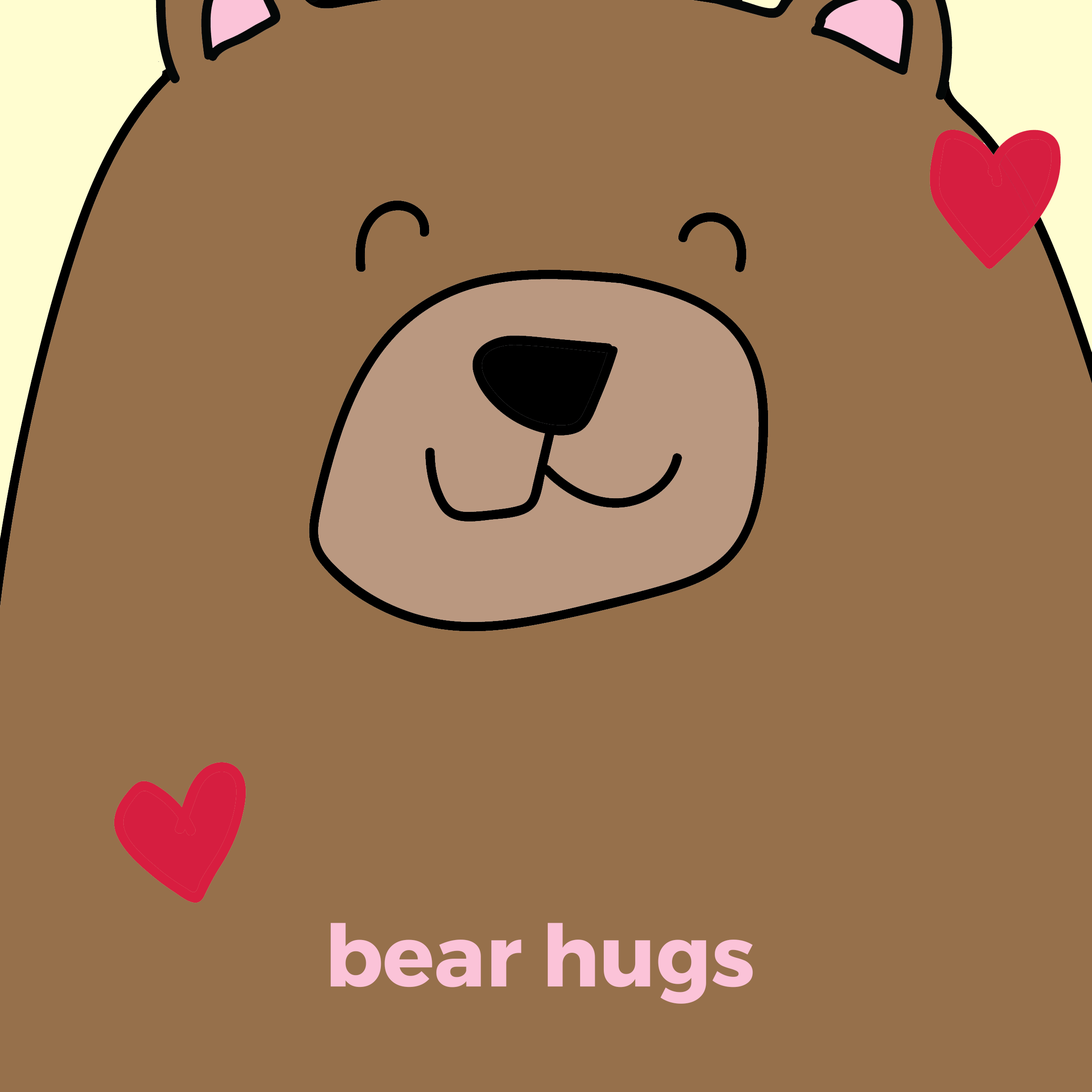
<style>
.page{position:relative;width:1092px;height:1092px;background:#96704b}
.page>*{position:absolute;margin:0}
.t1{font:85.3px "Montserrat-Bold";color:#fbc3d8}
</style>
<div class="page">
<p class="t1" style="left:330px;top:923px;width:423px;height:81px">bear hugs</p>
</div>
